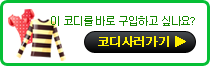
<style>
.page{position:relative;width:210px;height:66px;background:#ffffff}
.page>*{position:absolute;margin:0}
.t1{font:11px "Dotum";letter-spacing:-0.1em;color:#168600}
.t2{font:12px "Dotum";letter-spacing:-0.075em;color:#fff000;font-weight:bold}
</style>
<div class="page">
<p class="t1" style="left:51px;top:16px;width:144px;height:10px">이 코디를 바로 구입하고 싶나요?</p>
<p class="t2" style="left:98px;top:36px;width:88px;height:11px">코디사러가기 ▶</p>
</div>
